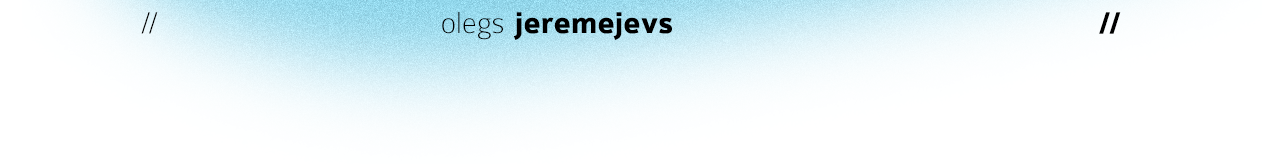
<style>
.page{position:relative;width:1262px;height:164px;background:#ffffff}
.page>*{position:absolute;margin:0}
.t1{font:32px "Colaborate-Thin";color:#000000}
.t2{font:32px "Colaborate-Bold";color:#000000}
</style>
<div class="page">
<p class="t1" style="left:141px;top:12px;width:17px;height:22px">//</p>
<p class="t1" style="left:442px;top:12px;width:61px;height:28px">olegs</p>
<p class="t2" style="left:513px;top:12px;width:159px;height:28px">jeremejevs</p>
<p class="t2" style="left:1099px;top:12px;width:22px;height:22px">//</p>
</div>
